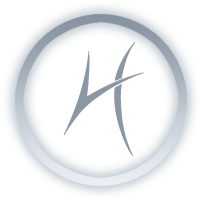
<style>
.page{position:relative;width:200px;height:200px;background:#ffffff}
.page>*{position:absolute;margin:0}
.t1{font:110px "Threadz-Needle";color:#8c97a4}
</style>
<div class="page">
<p class="t1" style="left:63px;top:42px;width:81px;height:114px">H</p>
</div>
